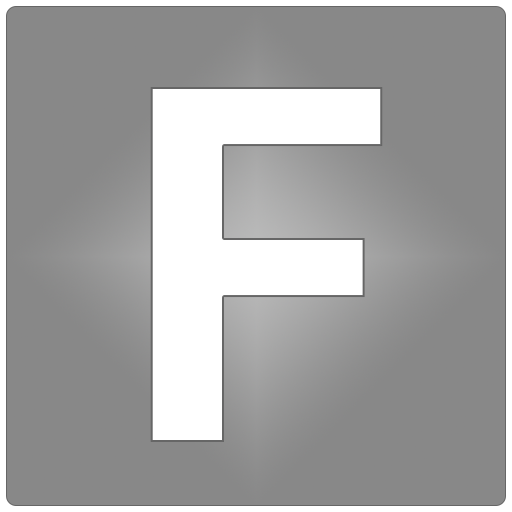
<style>
.page{position:relative;width:512px;height:512px;background:#888888}
.page>*{position:absolute;margin:0}
.t1{font:500px "Roboto-Bold";color:#ffffff}
</style>
<div class="page">
<p class="t1" style="left:150px;top:87px;width:233px;height:355px">F</p>
</div>
